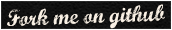
<style>
.page{position:relative;width:172px;height:30px}
.page>*{position:absolute;margin:0}
.t1{font:22.7px "MarcelleScript";color:#faf1e5}
</style>
<div class="page">
<p class="t1" style="left:7px;top:4px;width:158px;height:25px;rotate:-2deg">Fork me on github</p>
</div>
